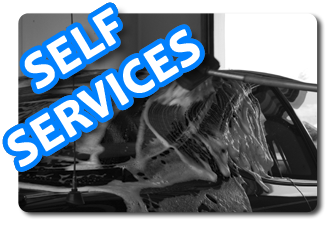
<style>
.page{position:relative;width:335px;height:225px;background:#ffffff}
.page>*{position:absolute;margin:0}
.t1{font:50.4px "Candara-Bold";color:#ffffff;font-weight:bold}
</style>
<div class="page">
<p class="t1" style="left:7px;top:7px;width:193px;height:160px;text-align:center;rotate:-31deg">SELF <br>SERVICES</p>
</div>
